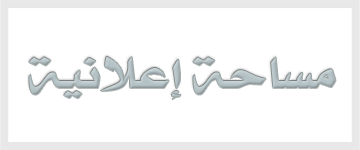
<style>
.page{position:relative;width:360px;height:150px;background:#ffffff}
.page>*{position:absolute;margin:0}
.t1{font:48.6px "mohammad-bold-art-1";color:#b5c3c7;scale:1.1 1}
</style>
<div class="page">
<p class="t1" style="left:29px;top:56px;width:307px;height:44px">مساحة إعلانية</p>
</div>
